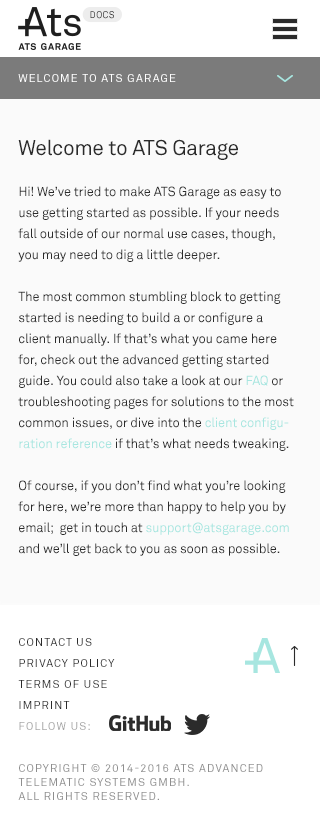
<style>
.page{position:relative;width:320px;height:830px;background:#fafafa}
.page>*{position:absolute;margin:0}
.t1{font:9.5px "AkkuratStd-Mono";letter-spacing:0.05em;color:#2b2b2b;text-transform:uppercase}
.t2{font:11px "AkkuratStd";letter-spacing:0.1em;color:#ffffff;text-transform:uppercase}
.t3{font:21px "AkkuratStd";letter-spacing:-0.01em;color:#2b2b2b}
.t4{font:13px/21px "AkkuratStd";letter-spacing:-0.01em;color:#2b2b2b}
.t5{font:13px/21px "AkkuratStd";letter-spacing:-0.01em;color:#a7e6e0}
.t6{font:11px/14px "AkkuratStd";letter-spacing:0.1em;color:#8e8e8e;text-transform:uppercase}
.t7{font:11px/21px "AkkuratStd";letter-spacing:0.1em;color:#2b2b2b;text-transform:uppercase}
.t8{font:11px/21px "AkkuratStd";letter-spacing:0.1em;color:#a4a4a4;text-transform:uppercase}
</style>
<div class="page">
<p class="t1" style="left:90px;top:11px;width:24px;height:8px">Docs</p>
<p class="t2" style="left:18px;top:74px;width:158px;height:8px">welcome to ats garage</p>
<p class="t3" style="left:18px;top:139px;width:220px;height:21px">Welcome to ATS Garage</p>
<p class="t4" style="left:18px;top:186px;width:276px;height:370px">Hi! We’ve tried to make ATS Garage as easy to use getting started as possible. If your needs fall outside of our normal use cases, though, you may need to dig a little deeper.<br><br>The most common stumbling block to getting started is needing to build a or configure a client manually. If that’s what you came here for, check out the advanced getting started guide. You could also take a look at our <span class="t5">FAQ </span>or troubleshooting pages for solutions to the most common issues, or dive into the <span class="t5">client configuration reference </span>if that’s what needs tweaking.<br><br>Of course, if you don’t find what you’re looking for here, we’re more than happy to help you by email;  get in touch at <span class="t5">support@atsgarage.com</span> and we’ll get back to you as soon as possible.</p>
<p class="t6" style="left:18px;top:638px;width:245px;height:162px"><span class="t7">contact us<br>Privacy Policy<br>Terms of Use<br>imprint<br></span><span class="t8">follow us:<br></span><br><br>Copyright © 2014-2016 ATS Advanced telematic systems gmbh. <br>All rights reserved.</p>
</div>
